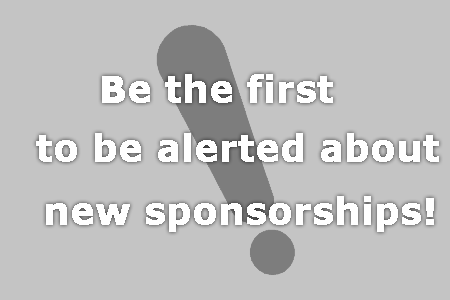
<style>
.page{position:relative;width:450px;height:300px;background:#c4c4c4}
.page>*{position:absolute;margin:0}
.t1{font:36px "Verdana-Bold";color:#ffffff;font-weight:bold}
</style>
<div class="page">
<p class="t1" style="left:102px;top:74px;width:231px;height:29px">Be the first</p>
<p class="t1" style="left:36px;top:133px;width:403px;height:29px">to be alerted about</p>
<p class="t1" style="left:46px;top:196px;width:388px;height:36px">new sponsorships!</p>
</div>
